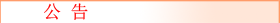
<style>
.page{position:relative;width:280px;height:23px;background:#ffffff}
.page>*{position:absolute;margin:0}
.t1{font:18px "SimSun";color:#ff0000}
</style>
<div class="page">
<p class="t1" style="left:44px;top:3px;width:44px;height:17px">公 告</p>
</div>
